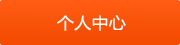
<style>
.page{position:relative;width:180px;height:45px}
.page>*{position:absolute;margin:0}
.t1{font:15.9px "MicrosoftYaHei";letter-spacing:0.01em;color:#fefefe;scale:1.08 1}
</style>
<div class="page">
<p class="t1" style="left:57px;top:15px;width:69px;height:16px">个人中心</p>
</div>
